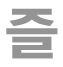
<style>
.page{position:relative;width:63px;height:67px;background:#ffffff}
.page>*{position:absolute;margin:0}
.t1{font:58.3px "YDIYGO350";color:#949494}
</style>
<div class="page">
<p class="t1" style="left:6px;top:8px;width:52px;height:51px">즐</p>
</div>
